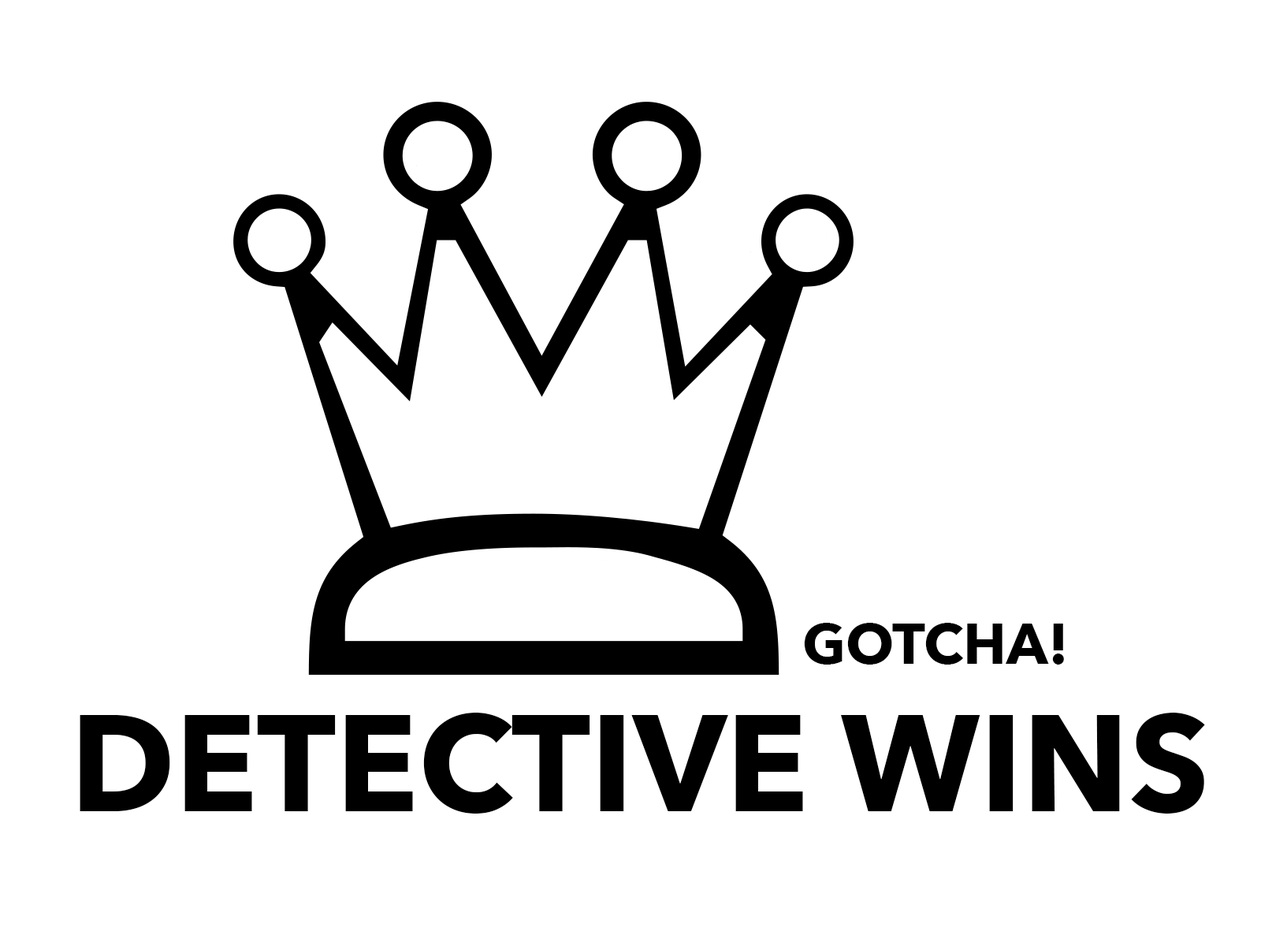
<style>
.page{position:relative;width:1261px;height:946px;background:#ffffff}
.page>*{position:absolute;margin:0}
.t1{font:56.7px "AvenirNext-Bold";color:#000000}
.t2{font:135.5px "AvenirNext-Bold";color:#000000}
</style>
<div class="page">
<p class="t1" style="left:804px;top:623px;width:260px;height:41px">GOTCHA!</p>
<p class="t2" style="left:80px;top:712px;width:1125px;height:101px">DETECTIVE WINS</p>
</div>
